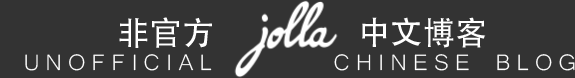
<style>
.page{position:relative;width:575px;height:78px;background:#333333}
.page>*{position:absolute;margin:0}
.t1{font:32.7px "AdobeHeitiStd-Regular";color:#ffffff}
.t2{font:28.8px "Microsoft-Yi-Baiti";letter-spacing:0.21em;color:#ffffff}
</style>
<div class="page">
<p class="t1" style="left:119px;top:17px;width:93px;height:31px">非官方</p>
<p class="t1" style="left:362px;top:17px;width:124px;height:31px">中文博客</p>
<p class="t2" style="left:25px;top:54px;width:187px;height:17px">UNOFFICIAL</p>
<p class="t2" style="left:334px;top:54px;width:241px;height:17px">CHINESE BLOG</p>
</div>
